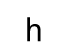
<style>
.page{position:relative;width:70px;height:55px;background:#ffffff}
.page>*{position:absolute;margin:0}
.t1{font:31.8px "DroidSans";color:#000000}
</style>
<div class="page">
<p class="t1" style="left:27px;top:17px;width:14px;height:25px">h</p>
</div>
